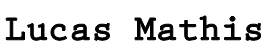
<style>
.page{position:relative;width:264px;height:47px;background:#ffffff}
.page>*{position:absolute;margin:0}
.t1{font:36px "PrestigeEliteStd-Bd";color:#000000}
</style>
<div class="page">
<p class="t1" style="left:6px;top:16px;width:255px;height:25px">Lucas Mathis</p>
</div>
